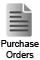
<style>
.page{position:relative;width:40px;height:60px;background:#ffffff}
.page>*{position:absolute;margin:0}
.t1{font:9px "ArialMT";color:#000000}
</style>
<div class="page">
<p class="t1" style="left:1px;top:40px;width:38px;height:18px;text-align:center">Purchase<br>Orders</p>
</div>
